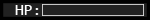
<style>
.page{position:relative;width:150px;height:20px;background:#212121}
.page>*{position:absolute;margin:0}
.t1{font:16px "Consolas";color:#ffffff}
</style>
<div class="page">
<p class="t1" style="left:15px;top:5px;width:24px;height:10px">HP:</p>
</div>
